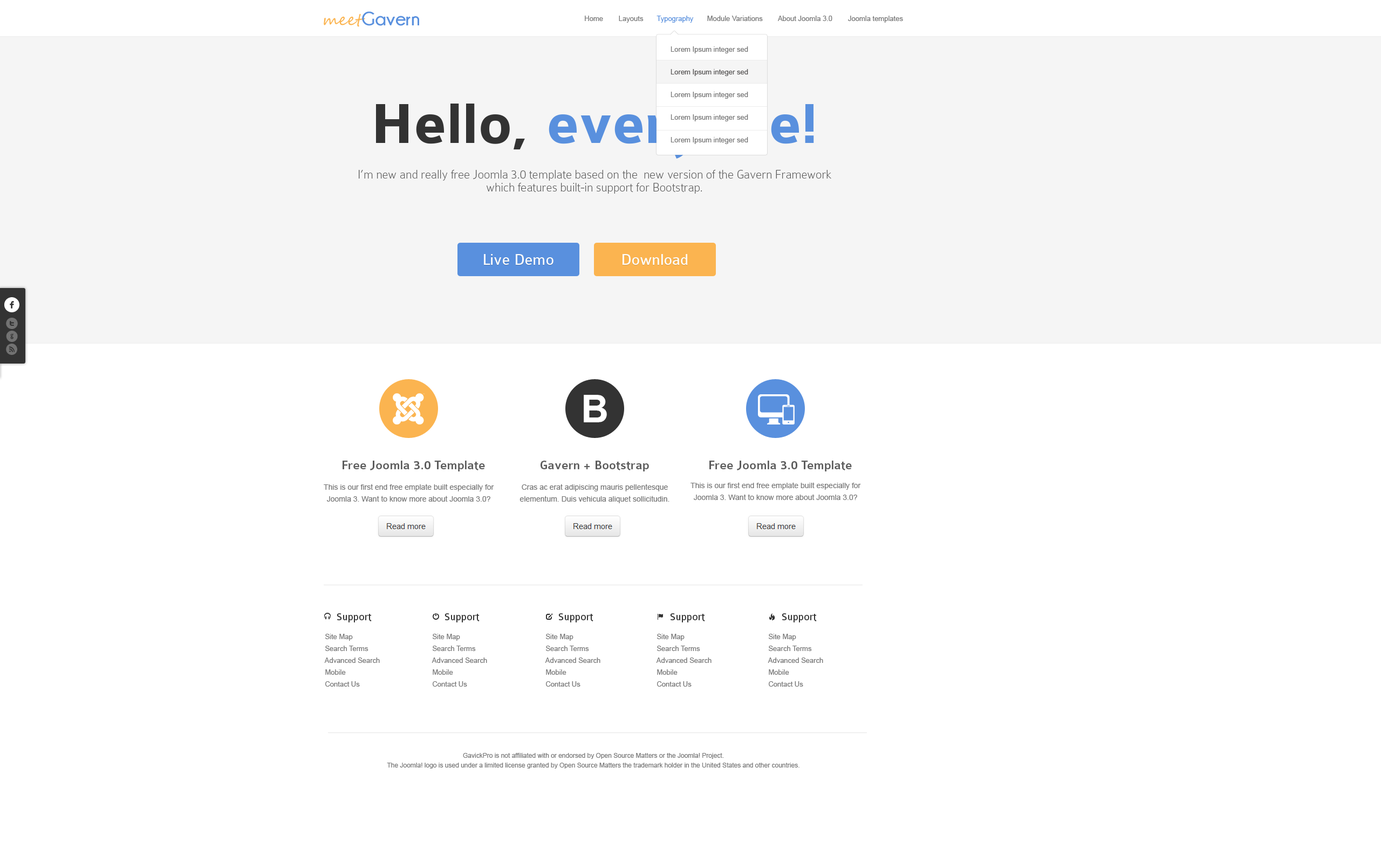
<style>
.page{position:relative;width:1381px;height:863px;background:#ffffff}
.page>*{position:absolute;margin:0}
.t1{font:19.4px "Champagne&Limousines-Bold";color:#5990de}
.t2{font:16.2px "SegoeScript";color:#fbb450}
.t3{font:7px "ArialMT";color:#777777}
.t4{font:7px "ArialMT";color:#5990de}
.t5{font:7px/22.7px "ArialMT";color:#777777}
.t6{font:7px/22.7px "ArialMT";color:#585656}
.t7{font:60.4px "Colaborate-Bold";color:#5990de}
.t8{font:60.4px "Colaborate-Bold";color:#333333}
.t9{font:12.9px/12.9px "Colaborate-Thin";color:#5c5c5c}
.t10{font:16.2px "Colaborate-Regular";color:#ffffff}
.t11{font:21.6px "Socialico";color:#ffffff}
.t12{font:16.2px/12.9px "Socialico";color:#727272}
.t13{font:21.6px/19.4px "Socialico";color:#ffffff}
.t14{font:38.5px "Arial-BoldMT";color:#ffffff}
.t15{font:12.9px "Colaborate-Medium";color:#5c5c5c}
.t16{font:7.6px/11.9px "ArialMT";color:#777777}
.t17{font:10.8px "Colaborate-Regular";color:#333333}
.t18{font:7px/11.9px "ArialMT";color:#777777}
.t19{font:6.5px/9.7px "ArialMT";color:#777777}
</style>
<div class="page">
<p class="t1" style="left:324px;top:11px;width:95px;height:16px"><span class="t2">meet</span>Gavern</p>
<p class="t3" style="left:585px;top:16px;width:318px;height:7px">Home        Layouts       <span class="t4">Typography       </span>Module Variations        About Joomla 3.0        Joomla templates</p>
<p class="t5" style="left:671px;top:46px;width:77px;height:98px;text-align:center">Lorem Ipsum integer sed<br><span class="t6">Lorem Ipsum integer sed<br></span>Lorem Ipsum integer sed<br>Lorem Ipsum integer sed<br>Lorem Ipsum integer sed</p>
<p class="t7" style="left:376px;top:104px;width:438px;height:55px"><span class="t8">Hello, </span>everyone!</p>
<p class="t9" style="left:359px;top:169px;width:472px;height:25px;text-align:center">I’m new and really free Joomla 3.0 template based on the  new version of the Gavern Framework which features built-in support for Bootstrap.</p>
<p class="t10" style="left:484px;top:254px;width:70px;height:11px">Live Demo</p>
<p class="t10" style="left:623px;top:254px;width:65px;height:11px">Download</p>
<p class="t11" style="left:4px;top:297px;width:15px;height:15px">f</p>
<p class="t12" style="left:6px;top:318px;width:12px;height:37px;text-align:center"><span class="t13"><br></span>t<br>g<br>r</p>
<p class="t14" style="left:584px;top:395px;width:23px;height:27px">B</p>
<p class="t15" style="left:343px;top:461px;width:142px;height:11px">Free Joomla 3.0 Template</p>
<p class="t15" style="left:541px;top:461px;width:108px;height:11px">Gavern + Bootstrap</p>
<p class="t15" style="left:710px;top:461px;width:142px;height:11px">Free Joomla 3.0 Template</p>
<p class="t16" style="left:324px;top:484px;width:170px;height:18px;text-align:center">This is our first end free emplate built especially for Joomla 3. Want to know more about Joomla 3.0?</p>
<p class="t16" style="left:520px;top:484px;width:150px;height:19px;text-align:center">Cras ac erat adipiscing mauris pellentesque elementum. Duis vehicula aliquet sollicitudin.</p>
<p class="t16" style="left:691px;top:482px;width:170px;height:18px;text-align:center">This is our first end free emplate built especially for Joomla 3. Want to know more about Joomla 3.0?</p>
<p class="t17" style="left:337px;top:613px;width:35px;height:10px">Support</p>
<p class="t17" style="left:445px;top:613px;width:35px;height:10px">Support</p>
<p class="t17" style="left:558px;top:613px;width:36px;height:10px">Support</p>
<p class="t17" style="left:670px;top:613px;width:35px;height:10px">Support</p>
<p class="t17" style="left:782px;top:613px;width:35px;height:10px">Support</p>
<p class="t18" style="left:324px;top:634px;width:56px;height:53px">Site Map<br>    Search Terms<br>    Advanced Search<br>    Mobile<br>    Contact Us</p>
<p class="t18" style="left:432px;top:634px;width:55px;height:53px">Site Map<br>    Search Terms<br>    Advanced Search<br>    Mobile<br>    Contact Us</p>
<p class="t18" style="left:545px;top:634px;width:56px;height:53px">Site Map<br>    Search Terms<br>    Advanced Search<br>    Mobile<br>    Contact Us</p>
<p class="t18" style="left:656px;top:634px;width:56px;height:53px">Site Map<br>    Search Terms<br>    Advanced Search<br>    Mobile<br>    Contact Us</p>
<p class="t18" style="left:768px;top:634px;width:55px;height:53px">Site Map<br>    Search Terms<br>    Advanced Search<br>    Mobile<br>    Contact Us</p>
<p class="t19" style="left:387px;top:753px;width:413px;height:16px;text-align:center">GavickPro is not affiliated with or endorsed by Open Source Matters or the Joomla! Project.<br>The Joomla! logo is used under a limited license granted by Open Source Matters the trademark holder in the United States and other countries.</p>
</div>
